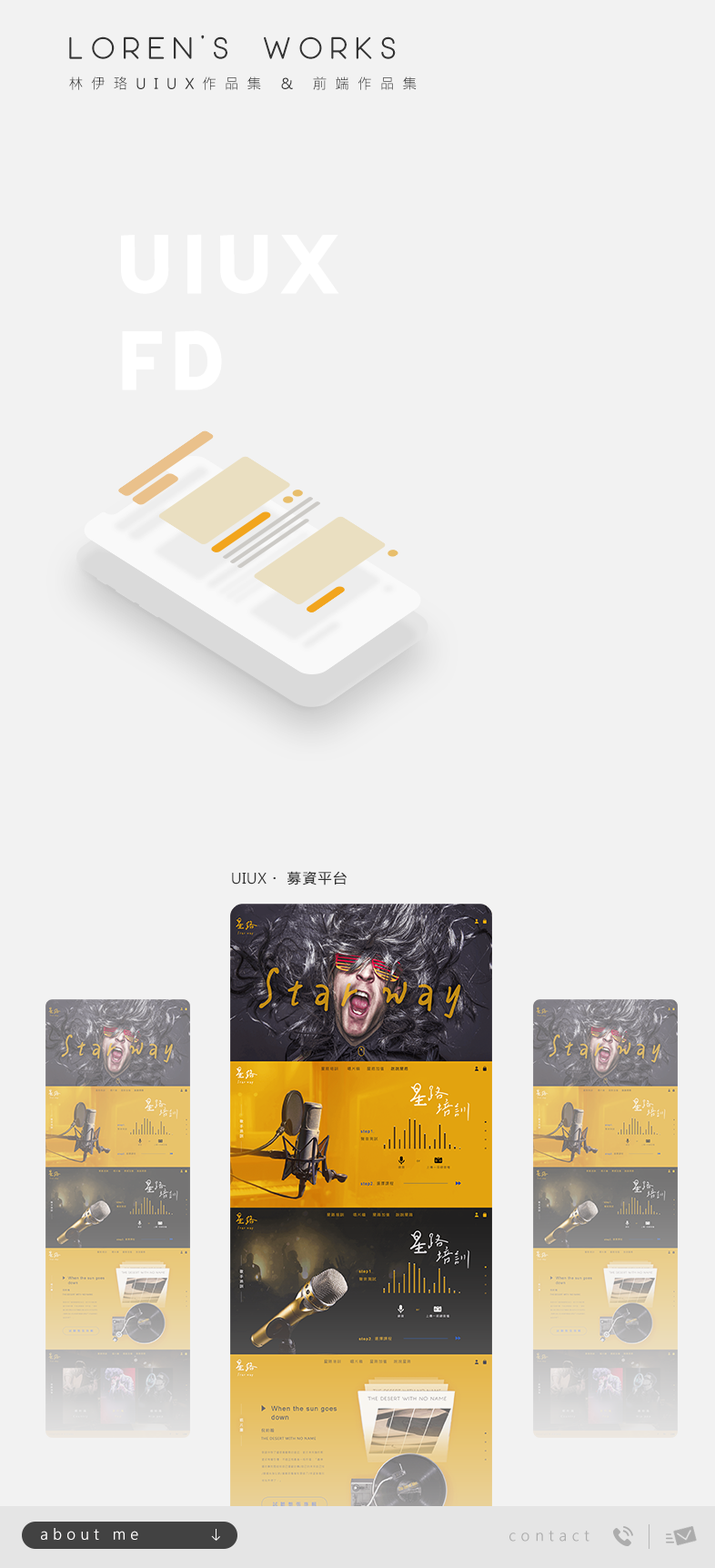
<style>
.page{position:relative;width:715px;height:1568px;background:#f2f2f2}
.page>*{position:absolute;margin:0}
.t1{font:14.6px/30px "MicrosoftJhengHeiRegular";letter-spacing:0.54em;color:#333333}
.t2{font:30.9px/70.8px "Moon2.0-Regular";letter-spacing:0.26em;color:#333333}
.t3{font:91.7px/96.5px "Affogato-Bold";letter-spacing:0.05em;color:#ffffff;scale:1.05 1}
.t4{font:14.6px "MicrosoftJhengHeiRegular";letter-spacing:0.025em;color:#333333;font-weight:bold}
.t5{font:14.6px "MicrosoftJhengHeiRegular";letter-spacing:0.025em;color:#333333}
.t6{font:14.6px "MicrosoftJhengHeiRegular";letter-spacing:0.32em;color:#fffefe}
.t7{font:14.6px "MicrosoftJhengHeiRegular";letter-spacing:0.34em;color:#acacac}
</style>
<div class="page">
<p class="t1" style="left:69px;top:35px;width:348px;height:55px"><span class="t2">LOREN’S WORKS<br></span>林伊珞UIUX作品集 &amp; 前端作品集</p>
<p class="t3" style="left:121px;top:234px;width:218px;height:156px">UIUX<br>FD</p>
<p class="t4" style="left:232px;top:871px;width:115px;height:14px"><span class="t5">UIUX</span>・ 募資平台</p>
<p class="t6" style="left:41px;top:1528px;width:97px;height:12px">about me</p>
<p class="t7" style="left:510px;top:1531px;width:80px;height:11px">contact</p>
</div>
